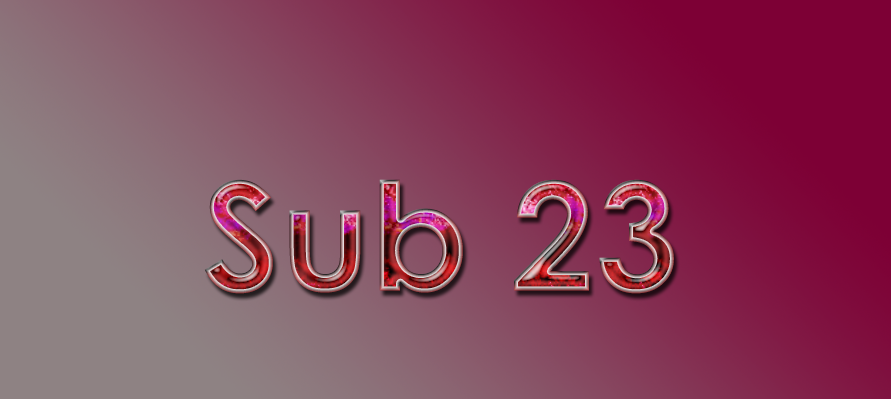
<style>
.page{position:relative;width:891px;height:399px}
.page>*{position:absolute;margin:0}
.t1{font:150px "CenturyGothic-Bold"}
</style>
<div class="page">
<p class="t1" style="left:204px;top:179px;width:470px;height:115px">Sub 23</p>
</div>
